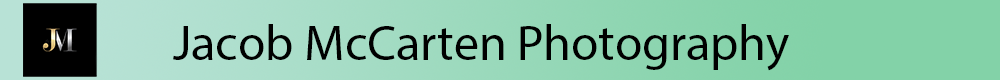
<style>
.page{position:relative;width:1000px;height:80px}
.page>*{position:absolute;margin:0}
.t1{font:50px "MyriadPro-Regular";color:#000000}
</style>
<div class="page">
<p class="t1" style="left:173px;top:24px;width:616px;height:47px">Jacob McCarten Photography</p>
</div>
